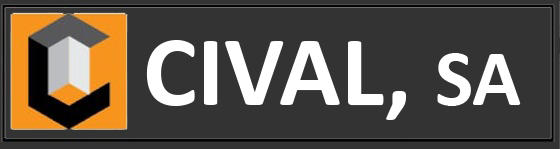
<style>
.page{position:relative;width:560px;height:149px;background:#333333}
.page>*{position:absolute;margin:0}
.t1{font:102px "Calibri-Bold";color:#ffffff}
.t2{font:81px "Calibri-Bold";color:#ffffff}
</style>
<div class="page">
<p class="t1" style="left:146px;top:40px;width:375px;height:80px">CIVAL, <span class="t2">SA</span></p>
</div>
